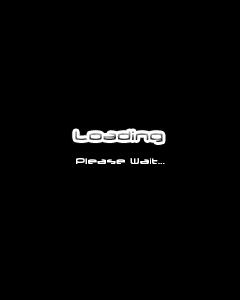
<style>
.page{position:relative;width:240px;height:300px;background:#000000}
.page>*{position:absolute;margin:0}
.t1{font:15px "ThundergodII"}
.t2{font:10px "ThundergodII";color:#ffffff}
</style>
<div class="page">
<p class="t1" style="left:75px;top:131px;width:88px;height:11px">Loading</p>
<p class="t2" style="left:76px;top:158px;width:89px;height:6px">Please Wait...</p>
</div>
